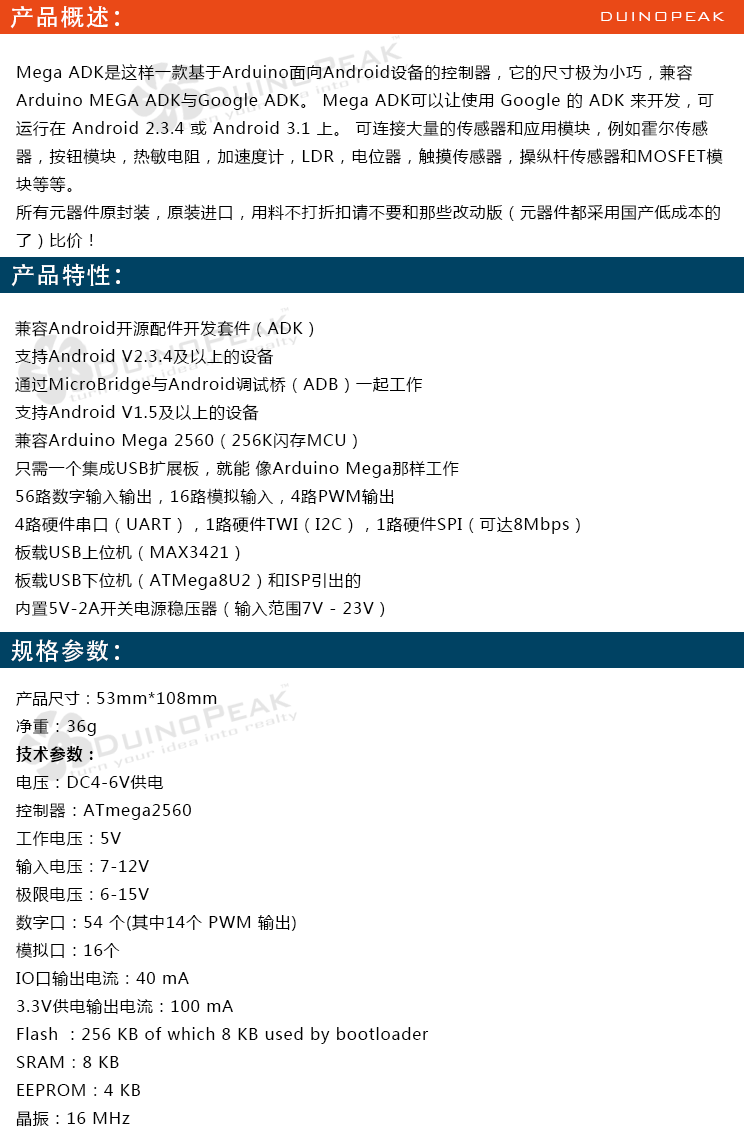
<style>
.page{position:relative;width:744px;height:1134px;background:#ffffff}
.page>*{position:absolute;margin:0}
.t1{font:24px "AdobeHeitiStd-Regular";letter-spacing:0.05em;color:#ffffff}
.t2{font:18px "BankGothicBT-Light";letter-spacing:0.05em;color:#ffffff}
.t3{font:16px "MicrosoftYaHei";letter-spacing:0.05em;color:#000000}
.t4{font:16px "MicrosoftYaHei";color:#000000}
.t5{font:16px "MicrosoftYaHei-Bold";letter-spacing:0.05em;color:#000000}
</style>
<div class="page">
<p class="t1" style="left:10px;top:6px;width:109px;height:23px">产品概述：</p>
<p class="t2" style="left:601px;top:12px;width:124px;height:9px">DUINOPEAK</p>
<p class="t3" style="left:16px;top:64px;width:707px;height:185px">Mega ADK是这样一款基于Arduino面向Android设备的控制器，它的尺寸极为小巧，兼容<br>Arduino MEGA ADK与Google ADK。 Mega ADK可以让使用 Google 的 ADK 来开发，可<br>运行在 Android 2.3.4 或 Android 3.1 上。 可连接大量的传感器和应用模块，例如霍尔传感<br>器，按钮模块，热敏电阻，加速度计，LDR，电位器，触摸传感器，操纵杆传感器和MOSFET模<br>块等等。 <br>所有元器件原封装，原装进口，用料不打折扣请不要和那些改动版（元器件都采用国产低成本的<br>了）比价！</p>
<p class="t1" style="left:11px;top:263px;width:109px;height:24px">产品特性：</p>
<p class="t3" style="left:15px;top:320px;width:565px;height:297px">兼容Android开源配件开发套件（ADK）<br>支持Android V2.3.4及以上的设备<br>通过MicroBridge与Android调试桥（ADB）一起工作<br>支持Android V1.5及以上的设备<br>兼容Arduino Mega 2560（256K闪存MCU）<br>只需一个集成USB扩展板，就能 像Arduino Mega那样工作<br>56路数字输入输出，16路模拟输入，4路PWM输出<br>4路硬件串口（UART），1路硬件TWI（I2C），1路硬件SPI（可达8Mbps）<br>板载USB上位机（MAX3421）<br>板载USB下位机（ATMega8U2）和ISP引出的<br>内置5V-2A开关电源稳压器（输入范围7V - 23V）</p>
<p class="t1" style="left:11px;top:639px;width:108px;height:23px">规格参数：</p>
<p class="t3" style="left:16px;top:691px;width:413px;height:436px"><span class="t4">产品尺寸：</span>53mm*108mm<br>净重：36g<br><span class="t5">技术参数：<br></span>电压：DC4-6V供电<br>控制器：ATmega2560<br>工作电压：5V<br>输入电压：7-12V<br>极限电压：6-15V<br>数字口：54 个(其中14个 PWM 输出)<br>模拟口：16个<br>IO口输出电流：40 mA<br>3.3V供电输出电流：100 mA<br>Flash ：256 KB of which 8 KB used by bootloader<br>SRAM：8 KB<br>EEPROM：4 KB<br>晶振：16 MHz</p>
</div>
